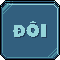
<style>
.page{position:relative;width:60px;height:60px;background:#325f7e}
.page>*{position:absolute;margin:0}
.t1{font:18px "SVN-Bango";letter-spacing:0.01em;color:#95d4d9}
</style>
<div class="page">
<p class="t1" style="left:13px;top:22px;width:33px;height:15px">Đôi</p>
<p class="t1" style="left:14px;top:23px;width:33px;height:15px">Đôi</p>
</div>
